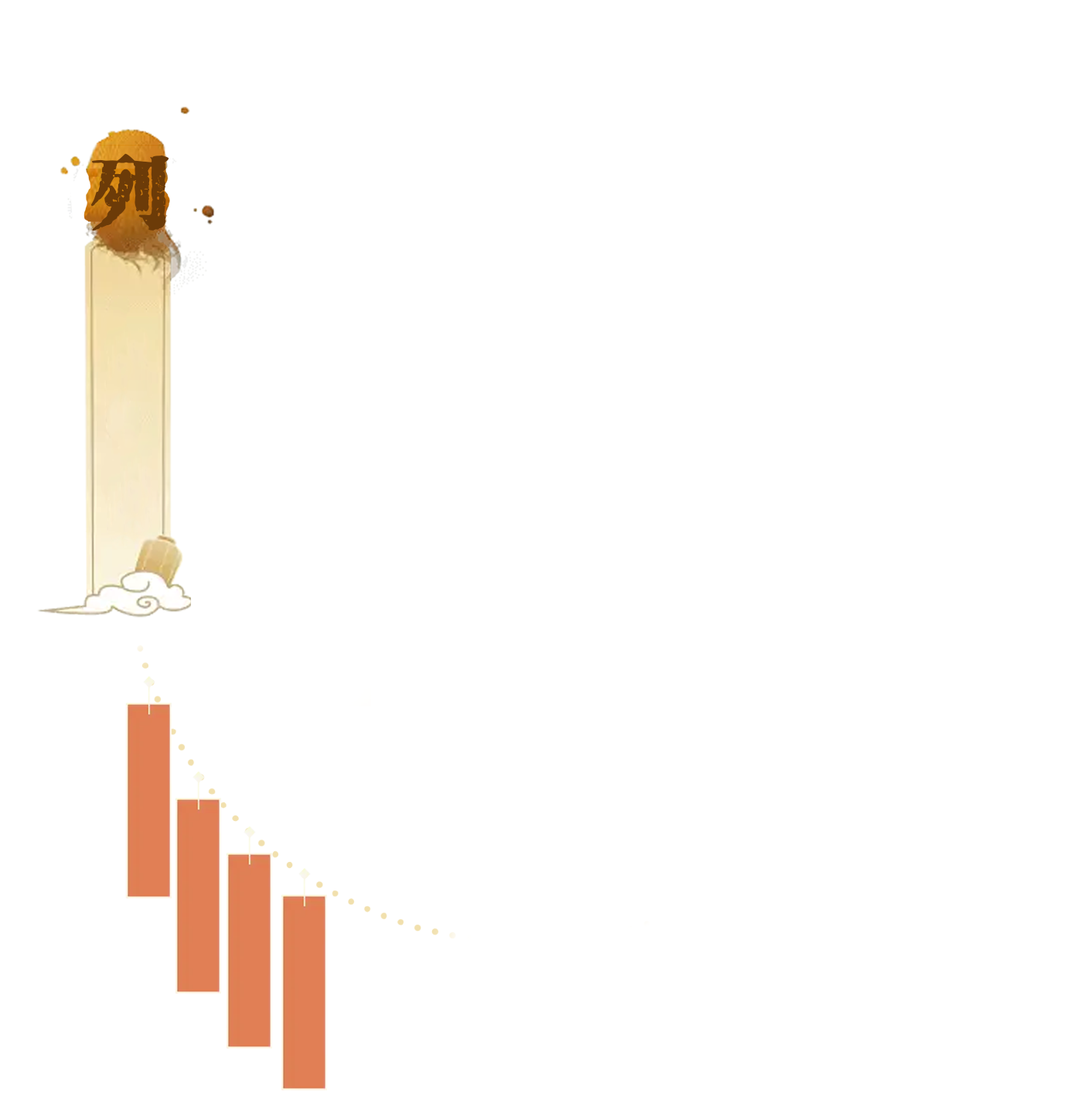
<style>
.page{position:relative;width:1090px;height:1094px;background:#ffffff}
.page>*{position:absolute;margin:0}
.t1{font:80.4px "SXSGYS";color:#6c3b08}
</style>
<div class="page">
<p class="t1" style="left:90px;top:153px;width:79px;height:78px">列</p>
</div>
